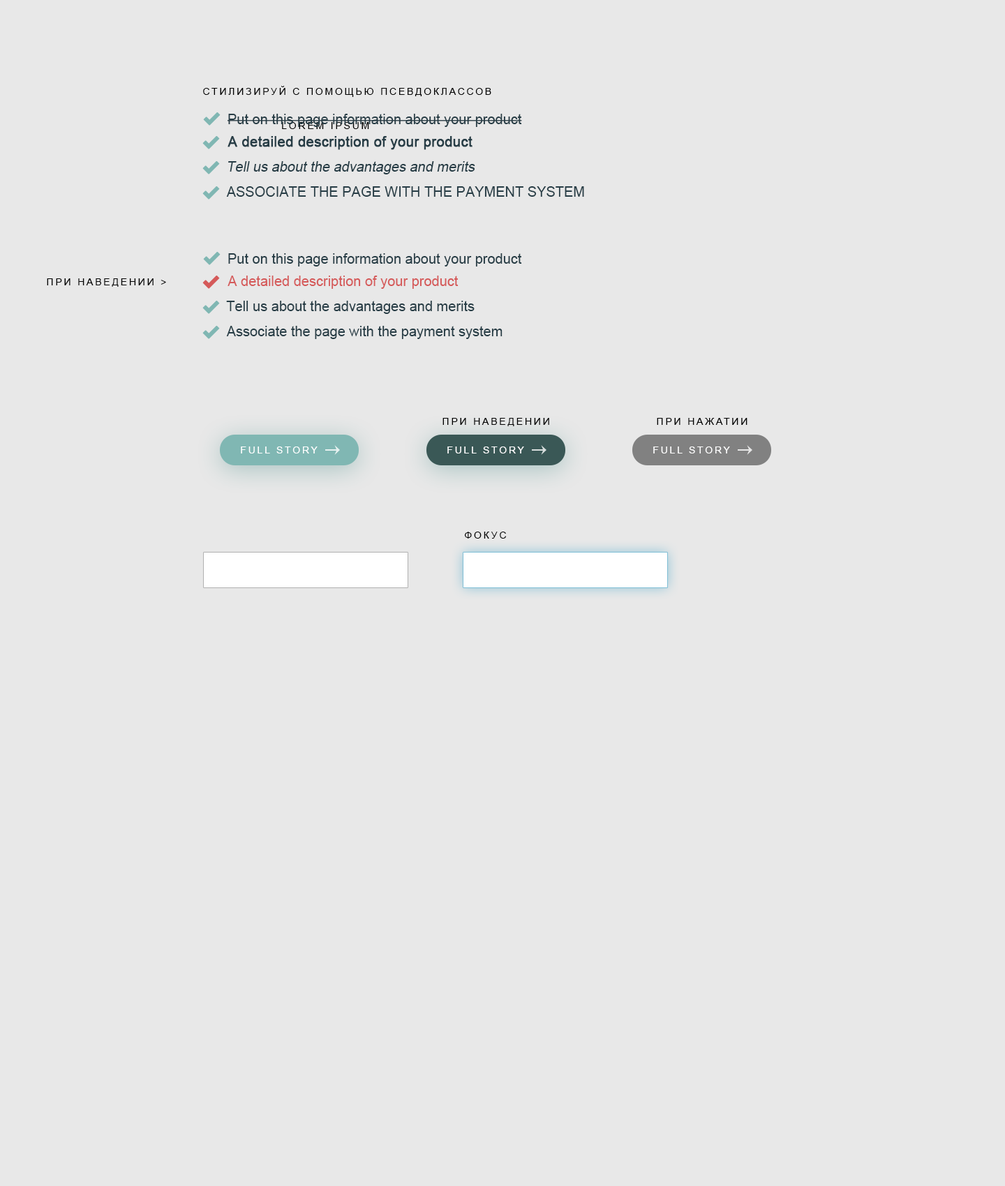
<style>
.page{position:relative;width:1005px;height:1186px;background:#e8e8e8}
.page>*{position:absolute;margin:0}
.t1{font:9.8px "ArialMT";letter-spacing:0.2em;color:#000000;text-transform:uppercase}
.t2{font:14px "ArialMT";color:#273d46}
.t3{font:14px "ArialMT";color:#273d46;font-weight:bold}
.t4{font:14px "ArialMT";color:#273d46;font-style:italic}
.t5{font:14px "ArialMT";color:#273d46;text-transform:uppercase}
.t6{font:14px "ArialMT";color:#d55a5a}
.t7{font:9.8px "ArialMT";letter-spacing:0.2em;color:#ffffff;text-transform:uppercase}
</style>
<div class="page">
<p class="t1" style="left:203px;top:86px;width:288px;height:11px">Стилизируй с помощью псевдоклассов</p>
<p class="t2" style="left:228px;top:114px;width:294px;height:13px">Put on this page information about your product</p>
<p class="t1" style="left:282px;top:122px;width:87px;height:7px">Lorem Ipsum</p>
<p class="t3" style="left:228px;top:136px;width:244px;height:14px">A detailed description of your product</p>
<p class="t4" style="left:228px;top:161px;width:247px;height:13px">Tell us about the advantages and merits</p>
<p class="t5" style="left:226px;top:186px;width:358px;height:11px">Associate the page with the payment system</p>
<p class="t2" style="left:228px;top:253px;width:294px;height:14px">Put on this page information about your product</p>
<p class="t1" style="left:47px;top:278px;width:119px;height:9px">При наведении &gt;</p>
<p class="t6" style="left:228px;top:276px;width:231px;height:13px">A detailed description of your product</p>
<p class="t2" style="left:226px;top:301px;width:249px;height:13px">Tell us about the advantages and merits</p>
<p class="t2" style="left:226px;top:326px;width:277px;height:13px">Associate the page with the payment system</p>
<p class="t1" style="left:442px;top:418px;width:107px;height:8px">При наведении</p>
<p class="t1" style="left:657px;top:418px;width:90px;height:7px">При нажатии</p>
<p class="t7" style="left:241px;top:447px;width:77px;height:7px">Full Story</p>
<p class="t7" style="left:447px;top:447px;width:77px;height:7px">Full Story</p>
<p class="t7" style="left:653px;top:447px;width:77px;height:7px">Full Story</p>
<p class="t1" style="left:465px;top:532px;width:42px;height:7px">Фокус</p>
</div>
